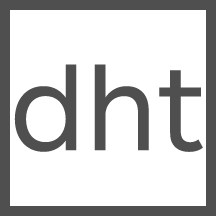
<style>
.page{position:relative;width:216px;height:216px;background:#ffffff}
.page>*{position:absolute;margin:0}
.t1{font:120px "ARSMaquettePro-Regular";color:#504f4f}
</style>
<div class="page">
<p class="t1" style="left:14px;top:64px;width:189px;height:88px">dht</p>
</div>
